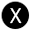
<style>
.page{position:relative;width:31px;height:31px;background:#000000}
.page>*{position:absolute;margin:0}
.t1{font:20.8px "DroidSansMono";color:#ffffff}
</style>
<div class="page">
<p class="t1" style="left:10px;top:8px;width:12px;height:16px">X</p>
</div>
